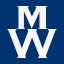
<style>
.page{position:relative;width:64px;height:64px;background:#003471}
.page>*{position:absolute;margin:0}
.t1{font:44px "Copperplate-Bold";color:#f8f4f4}
.t2{font:55px "Copperplate";color:#f8f5f5}
</style>
<div class="page">
<p class="t1" style="left:17px;top:6px;width:31px;height:23px">M</p>
<p class="t2" style="left:7px;top:29px;width:50px;height:29px">W</p>
</div>
